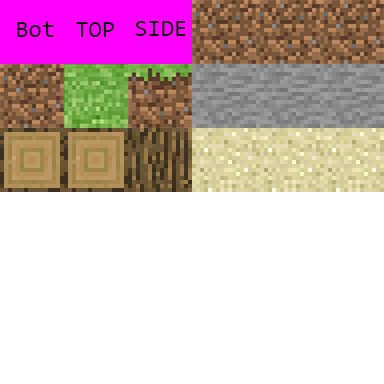
<style>
.page{position:relative;width:384px;height:384px;background:#ffffff}
.page>*{position:absolute;margin:0}
.t1{font:24px "Consolas";color:#121212}
</style>
<div class="page">
<p class="t1" style="left:17px;top:21px;width:37px;height:16px">Bot</p>
<p class="t1" style="left:76px;top:22px;width:38px;height:15px">TOP</p>
<p class="t1" style="left:135px;top:21px;width:51px;height:15px">SIDE</p>
</div>
